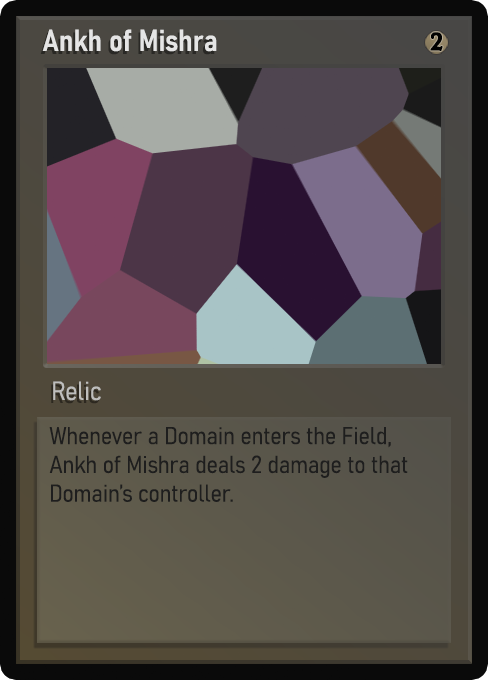
<style>
.page{position:relative;width:488px;height:680px}
.page>*{position:absolute;margin:0}
.t1{font:30px "Bahnschrift-SemiBoldSemiCondensed";color:#f2f2f2;font-weight:bold}
.t2{font:25px "WTRRoycroft";color:#000000;font-weight:bold;scale:1.09 1}
.t3{font:26px "Bahnschrift-LightSemiCondensed";color:#c8c8c8;font-weight:bold}
.t4{font:24px "Bahnschrift-LightSemiCondensed";color:#1e1e1e;font-weight:bold}
</style>
<div class="page">
<p class="t1" style="left:42px;top:29px;width:175px;height:23px;opacity:0.9">Ankh of Mishra</p>
<p class="t2" style="left:430px;top:32px;width:13px;height:19px">2</p>
<p class="t3" style="left:53px;top:381px;width:48px;height:20px;opacity:0.9">Relic</p>
<p class="t4" style="left:49px;top:427px;width:359px;height:75px">Whenever a Domain enters the Field, Ankh of Mishra deals 2 damage to that Domain’s controller.</p>
</div>
